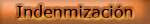
<style>
.page{position:relative;width:150px;height:24px}
.page>*{position:absolute;margin:0}
.t1{font:16px "Verdana"}
</style>
<div class="page">
<p class="t1" style="left:17px;top:5px;width:116px;height:13px">Indenmización</p>
</div>
